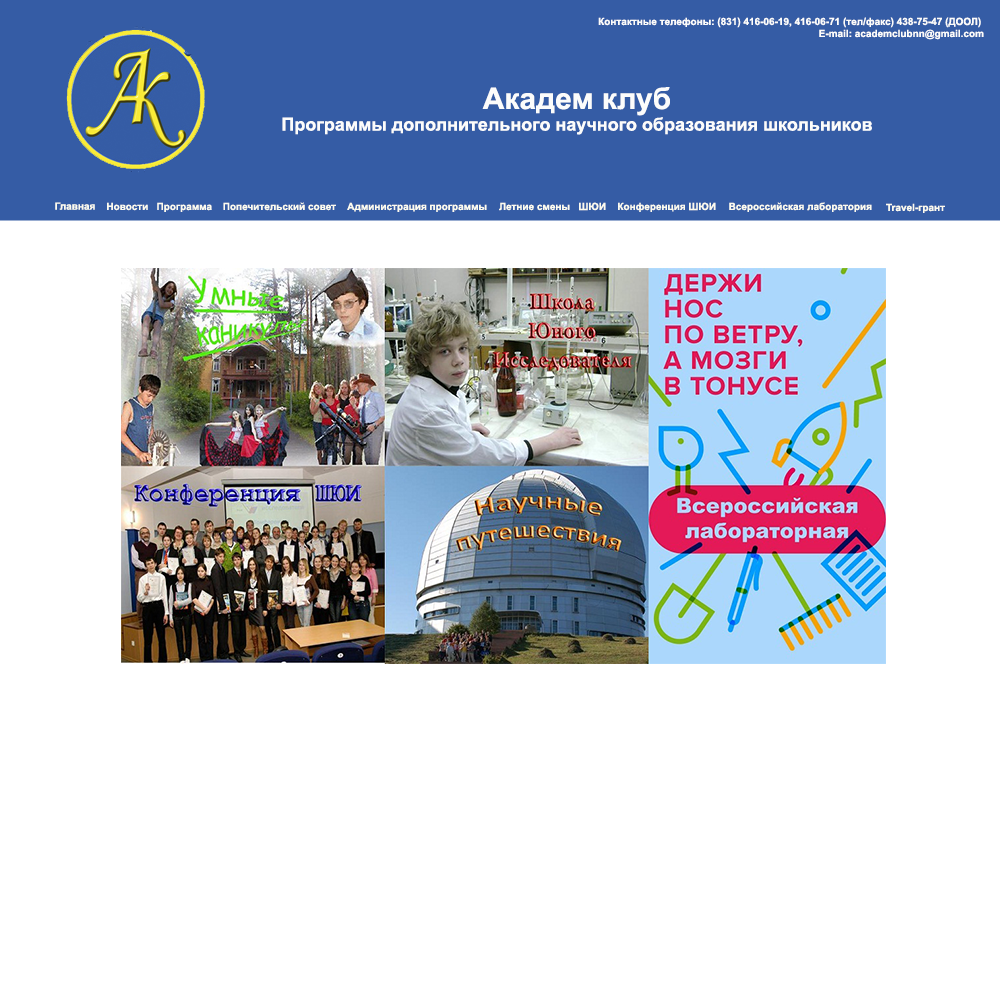
<style>
.page{position:relative;width:1000px;height:1000px;background:#ffffff}
.page>*{position:absolute;margin:0}
.t1{font:10px "Arial-BoldMT";color:#fcfcfb}
.t2{font:18px "Arial-BoldMT";color:#fcfcfb}
.t3{font:30px "Arial-BoldMT";color:#fcfcfb}
.t4{font:10px "Arial-BoldMT";color:#fcfbef}
</style>
<div class="page">
<p class="t1" style="left:598px;top:17px;width:386px;height:23px;text-align:right">Контактные телефоны: (831) 416-06-19, 416-06-71 (тел/факс) 438-75-47 (ДООЛ) <br>E-mail: academclubnn@gmail.com</p>
<p class="t2" style="left:282px;top:87px;width:590px;height:48px;text-align:center"><span class="t3">Академ клуб<br></span>Программы дополнительного научного образования школьников</p>
<p class="t4" style="left:55px;top:202px;width:40px;height:8px">Главная</p>
<p class="t4" style="left:107px;top:202px;width:41px;height:9px">Новости</p>
<p class="t4" style="left:157px;top:202px;width:55px;height:10px">Программа</p>
<p class="t4" style="left:223px;top:202px;width:113px;height:9px">Попечительский совет</p>
<p class="t4" style="left:347px;top:202px;width:140px;height:10px">Администрация программы</p>
<p class="t4" style="left:499px;top:202px;width:71px;height:9px">Летние смены</p>
<p class="t4" style="left:579px;top:202px;width:27px;height:9px">ШЮИ</p>
<p class="t4" style="left:618px;top:202px;width:98px;height:10px">Конференция ШЮИ</p>
<p class="t4" style="left:729px;top:202px;width:143px;height:10px">Всероссийская лаборатория</p>
<p class="t4" style="left:886px;top:203px;width:59px;height:10px">Travel-грант</p>
</div>
